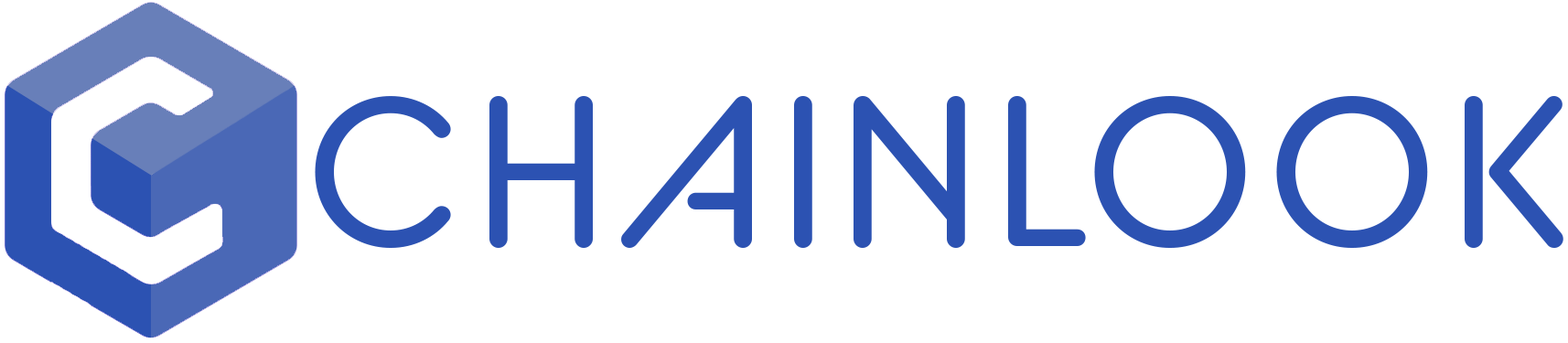
<style>
.page{position:relative;width:1568px;height:343px;background:#ffffff}
.page>*{position:absolute;margin:0}
.t1{font:211.9px "BCAlphapipeRB-Regular";letter-spacing:0.06em;color:#2c52b2}
</style>
<div class="page">
<p class="t1" style="left:315px;top:96px;width:1248px;height:152px">CHAINLOOK</p>
</div>
